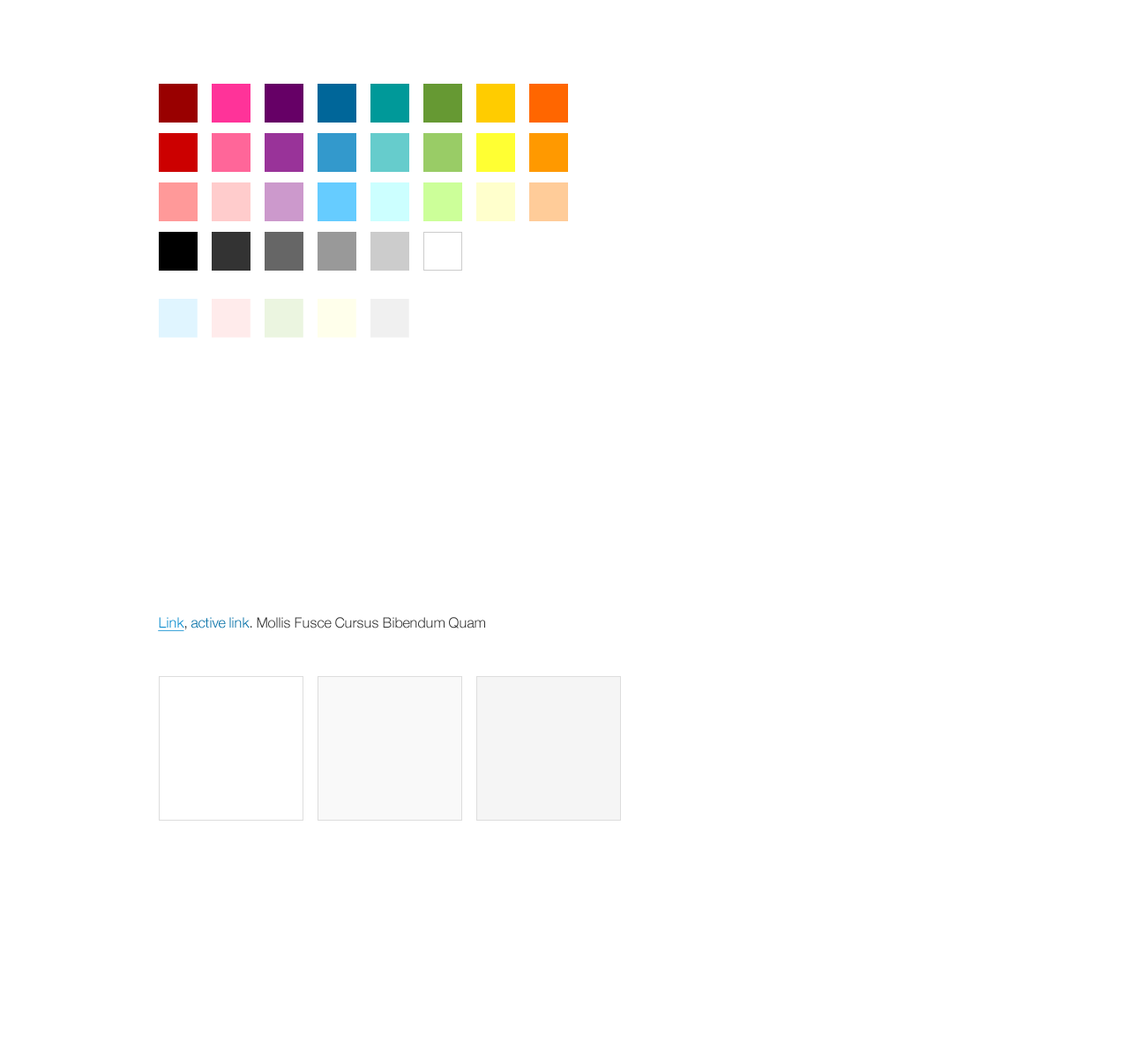
<style>
.page{position:relative;width:1129px;height:1056px;background:#ffffff}
.page>*{position:absolute;margin:0}
.t1{font:14.1px "HelveticaNeue-Light";color:#333333}
.t2{font:14.1px "HelveticaNeue-Light";color:#0088cc;text-decoration:underline}
.t3{font:14.1px "HelveticaNeue-Light";color:#006ea6}
</style>
<div class="page">
<p class="t1" style="left:158px;top:617px;width:327px;height:14px"><span class="t2">Link</span>, <span class="t3">active link</span>. Mollis Fusce Cursus Bibendum Quam</p>
</div>
